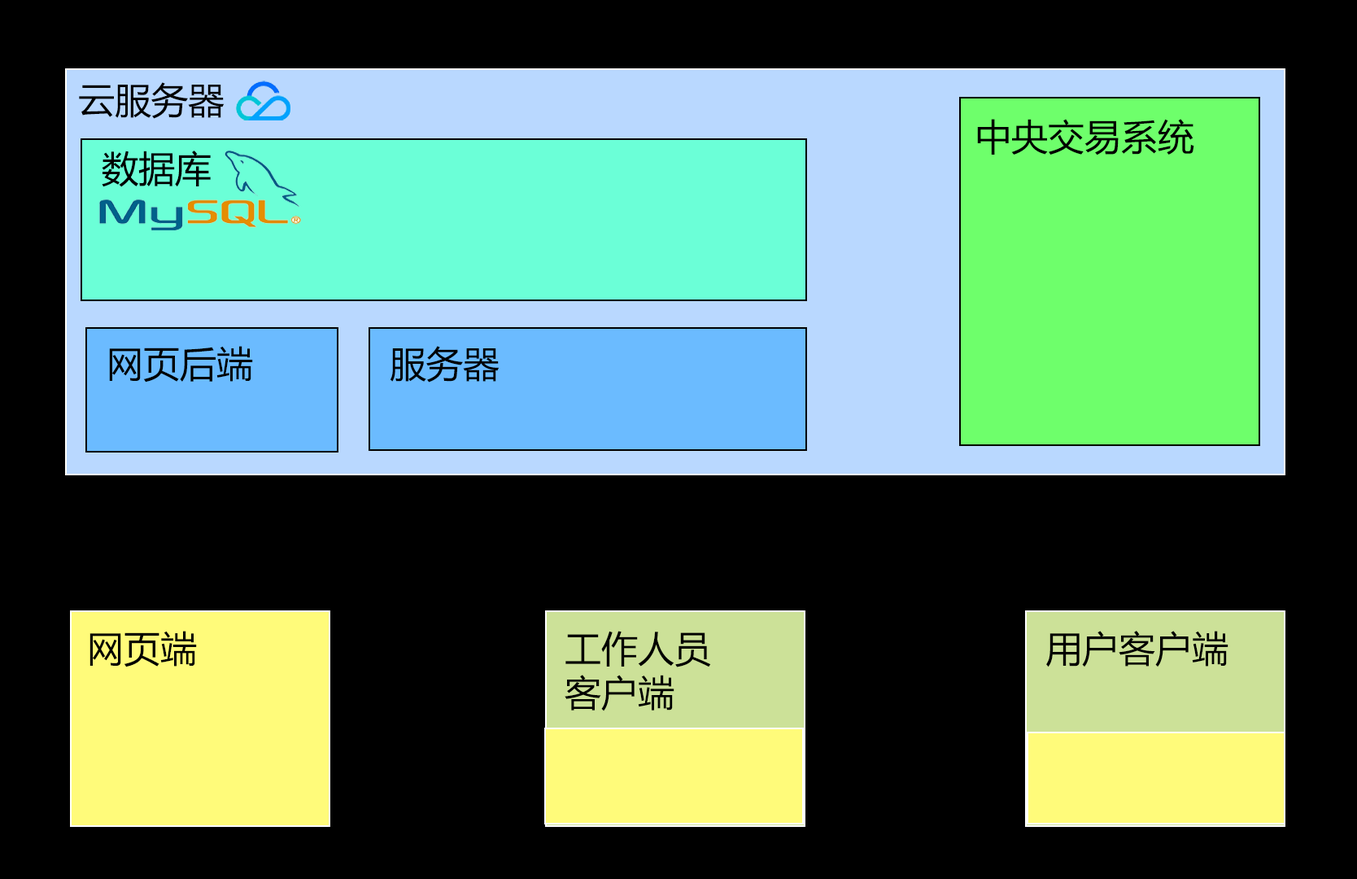
<style>
.page{position:relative;width:1357px;height:879px;background:#000000}
.page>*{position:absolute;margin:0}
.t1{font:36.6px "MicrosoftYaHei";color:#000000}
.t2{font:36.6px/14.8px "MicrosoftYaHei";color:#000000}
</style>
<div class="page">
<p class="t1" style="left:79px;top:82px;width:146px;height:37px">云服务器</p>
<p class="t1" style="left:977px;top:119px;width:217px;height:36px">中央交易系统</p>
<p class="t1" style="left:102px;top:151px;width:109px;height:36px">数据库</p>
<p class="t1" style="left:109px;top:346px;width:144px;height:36px">网页后端</p>
<p class="t1" style="left:390px;top:346px;width:110px;height:36px">服务器</p>
<p class="t1" style="left:89px;top:631px;width:108px;height:36px">网页端</p>
<p class="t2" style="left:565px;top:631px;width:146px;height:80px">工作人员<br><br><br>客户端</p>
<p class="t1" style="left:1046px;top:631px;width:183px;height:36px">用户客户端</p>
</div>
